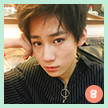
<style>
.page{position:relative;width:108px;height:108px}
.page>*{position:absolute;margin:0}
.t1{font:12px "DFPiPi-W5-WINP-BF";letter-spacing:0.1em;color:#ffffff;font-weight:bold}
</style>
<div class="page">
<p class="t1" style="left:90px;top:89px;width:7px;height:10px">8</p>
</div>
